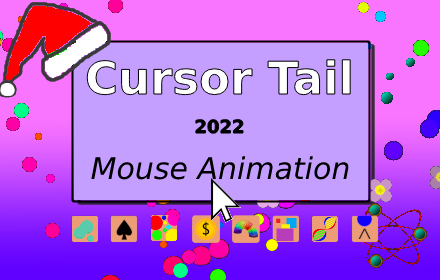
<style>
.page{position:relative;width:440px;height:280px;background:#c49fff}
.page>*{position:absolute;margin:0}
.t1{font:45px "DejaVuSans-Bold";color:#ffffff}
.t2{font:18px "DejaVuSans-Bold";color:#000000}
.t3{font:30px "DejaVuSans-Oblique";color:#000000}
</style>
<div class="page">
<p class="t1" style="left:86px;top:58px;width:266px;height:77px;text-align:center">Cursor Tail<br><br><span class="t2">2022</span></p>
<p class="t3" style="left:91px;top:156px;width:258px;height:24px">Mouse Animation</p>
</div>
